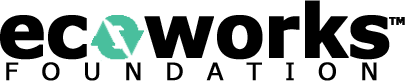
<style>
.page{position:relative;width:405px;height:81px;background:#ffffff}
.page>*{position:absolute;margin:0}
.t1{font:74.2px "Verdana-Bold";letter-spacing:-0.03em;color:#000000;font-weight:bold}
.t2{font:24px "Verdana";letter-spacing:0.94em;color:#000000;font-weight:bold}
</style>
<div class="page">
<p class="t1" style="left:0px;top:0px;width:390px;height:60px">ec  works</p>
<p class="t2" style="left:6px;top:62px;width:371px;height:19px">FOUNDATION</p>
</div>
